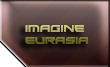
<style>
.page{position:relative;width:110px;height:67px}
.page>*{position:absolute;margin:0}
.t1{font:10px "Xirod-Regular"}
</style>
<div class="page">
<p class="t1" style="left:25px;top:25px;width:63px;height:19px">IMAGINE<br>EURASIA</p>
</div>
